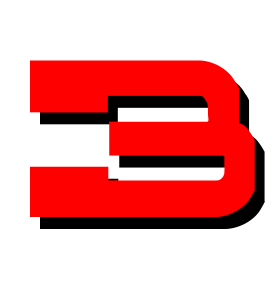
<style>
.page{position:relative;width:274px;height:300px;background:#ffffff}
.page>*{position:absolute;margin:0}
.t1{font:250px "Interdiction";color:#ff0000}
.t2{font:250px "Interdiction"}
</style>
<div class="page">
<p class="t1" style="left:30px;top:60px;width:225px;height:157px">3</p>
<p class="t2" style="left:40px;top:72px;width:225px;height:157px">3</p>
</div>
